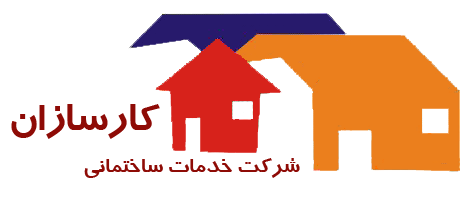
<style>
.page{position:relative;width:468px;height:200px;background:#ffffff}
.page>*{position:absolute;margin:0}
.t1{font:42.3px "BTrafficBold";color:#8e0b06}
.t2{font:21.9px "BTrafficBold";color:#8e0b06}
</style>
<div class="page">
<p class="t1" style="left:11px;top:104px;width:149px;height:35px">کارسازان</p>
<p class="t2" style="left:84px;top:158px;width:216px;height:20px">شرکت خدمات ساختمانی</p>
</div>
